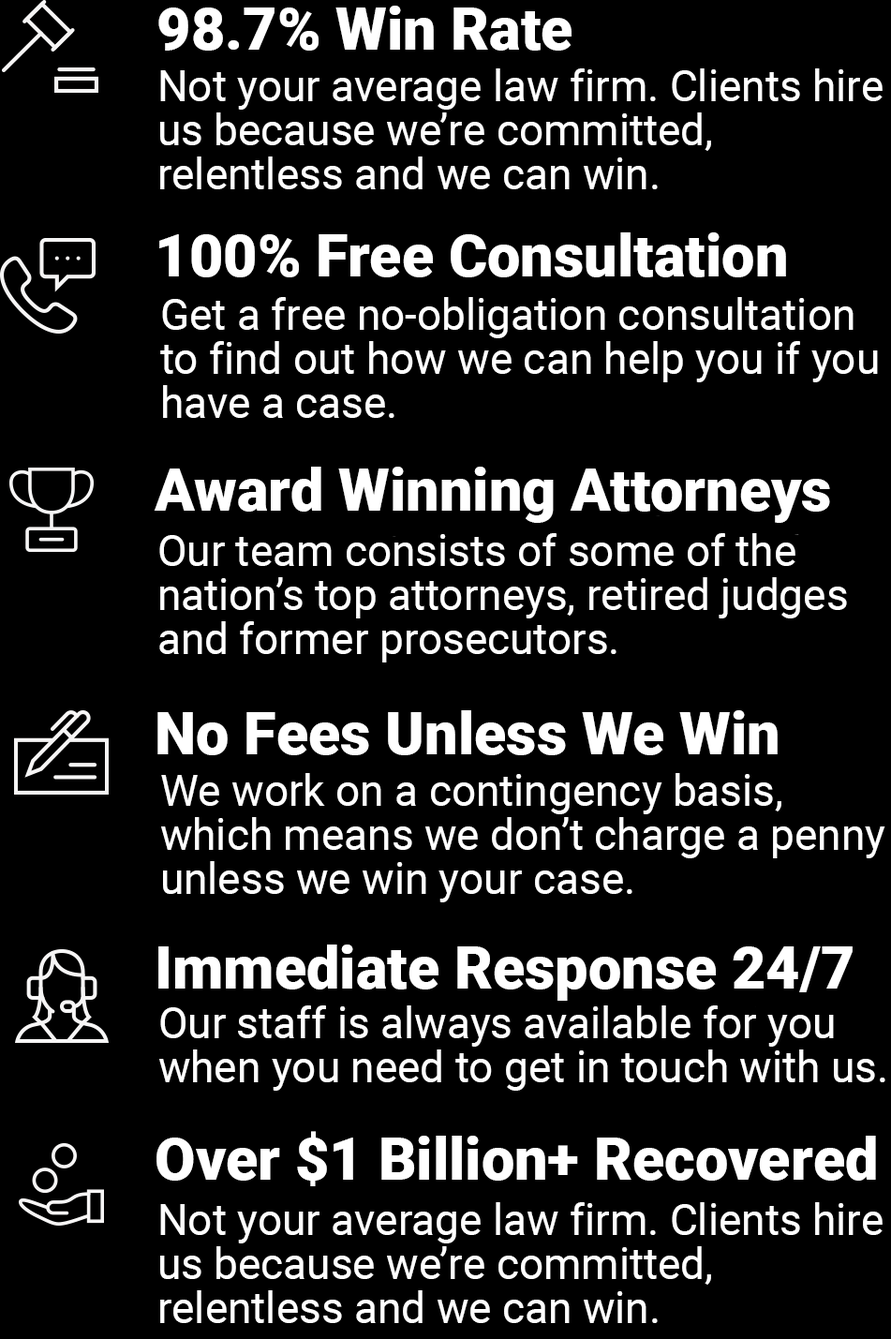
<style>
.page{position:relative;width:891px;height:1339px;background:#000000}
.page>*{position:absolute;margin:0}
.t1{font:59px "Roboto-Black";color:#ffffff}
.t2{font:43.1px/44px "Roboto-Regular";color:#ffffff}
</style>
<div class="page">
<p class="t1" style="left:158px;top:6px;width:413px;height:45px">98.7% Win Rate</p>
<p class="t2" style="left:160px;top:68px;width:722px;height:121px">Not your average law firm. Clients hire<br>us because we’re committed,<br>relentless and we can win.</p>
<p class="t1" style="left:159px;top:232px;width:627px;height:45px">100% Free Consultation</p>
<p class="t2" style="left:160px;top:297px;width:718px;height:121px">Get a free no-obligation consultation<br>to find out how we can help you if you<br>have a case.</p>
<p class="t1" style="left:154px;top:466px;width:676px;height:57px">Award Winning Attorneys</p>
<p class="t2" style="left:159px;top:533px;width:688px;height:129px">Our team consists of some of the<br>nation’s top attorneys, retired judges<br>and former prosecutors.</p>
<p class="t1" style="left:157px;top:710px;width:620px;height:45px">No Fees Unless We Win</p>
<p class="t2" style="left:161px;top:773px;width:724px;height:129px">We work on a contingency basis,<br>which means we don’t charge a penny<br>unless we win your case.</p>
<p class="t1" style="left:158px;top:944px;width:694px;height:56px">Immediate Response 24/7</p>
<p class="t2" style="left:159px;top:1005px;width:726px;height:85px">Our staff is always available for you<br>when you need to get in touch with us.</p>
<p class="t1" style="left:156px;top:1131px;width:720px;height:55px">Over $1 Billion+ Recovered</p>
<p class="t2" style="left:160px;top:1202px;width:722px;height:121px">Not your average law firm. Clients hire<br>us because we’re committed,<br>relentless and we can win.</p>
</div>
